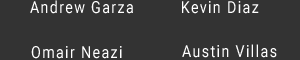
<style>
.page{position:relative;width:300px;height:60px;background:#333333}
.page>*{position:absolute;margin:0}
.t1{font:16.5px "Roboto-Regular";letter-spacing:0.1em;color:#ffffff;scale:0.86 1}
</style>
<div class="page">
<p class="t1" style="left:30px;top:0px;width:103px;height:14px">Andrew Garza</p>
<p class="t1" style="left:182px;top:1px;width:77px;height:13px">Kevin Diaz</p>
<p class="t1" style="left:31px;top:46px;width:91px;height:13px">Omair Neazi</p>
<p class="t1" style="left:182px;top:44px;width:95px;height:14px">Austin Villas</p>
</div>
